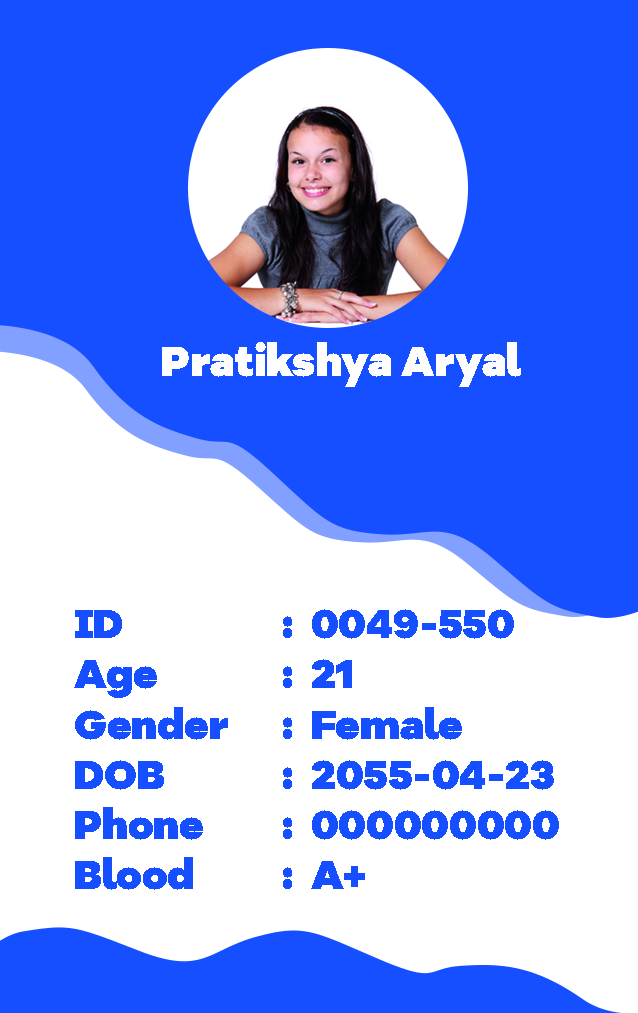
<style>
.page{position:relative;width:638px;height:1013px;background:#164fff}
.page>*{position:absolute;margin:0}
.t1{font:43.2px "BolgartDisplay";color:#fefefe}
.t2{font:41.8px "BolgartDisplay";color:#164fff}
</style>
<div class="page">
<p class="t1" style="left:162px;top:342px;width:359px;height:45px">Pratikshya Aryal</p>
<p class="t2" style="left:74px;top:609px;width:485px;height:281px">ID      :  0049-550<br>Age     :  21<br>Gender   :  Female   <br>DOB     :  2055-04-23<br>Phone    :  000000000<br>Blood    :  A+</p>
</div>
